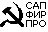
<style>
.page{position:relative;width:48px;height:32px;background:#ffffff}
.page>*{position:absolute;margin:0}
.t1{font:9px/9px "Tahoma";color:#000000}
</style>
<div class="page">
<p class="t1" style="left:26px;top:2px;width:20px;height:25px;text-align:center">САП<br>ФИР<br>ПРО</p>
</div>
